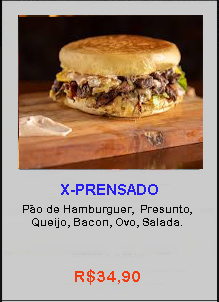
<style>
.page{position:relative;width:219px;height:302px;background:#cbcbcb}
.page>*{position:absolute;margin:0}
.t1{font:14.7px "Arial-BoldMT";color:#261cf4}
.t2{font:10.7px "ArialRoundedMTBold";color:#090909}
.t3{font:16px "ArialRoundedMTBold";color:#f33c12}
</style>
<div class="page">
<p class="t1" style="left:61px;top:184px;width:97px;height:11px">X-PRENSADO</p>
<p class="t2" style="left:23px;top:205px;width:169px;height:23px;text-align:center">Pão de Hamburguer,  Presunto, Queijo, Bacon, Ovo, Salada.</p>
<p class="t3" style="left:75px;top:269px;width:65px;height:16px">R$34,90</p>
</div>
